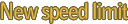
<style>
.page{position:relative;width:128px;height:24px;background:#ffffff}
.page>*{position:absolute;margin:0}
.t1{font:22px "BellGothicStd-Bold";letter-spacing:-0.065em;color:#e5b743}
</style>
<div class="page">
<p class="t1" style="left:1px;top:2px;width:128px;height:21px">New speed limit</p>
</div>
